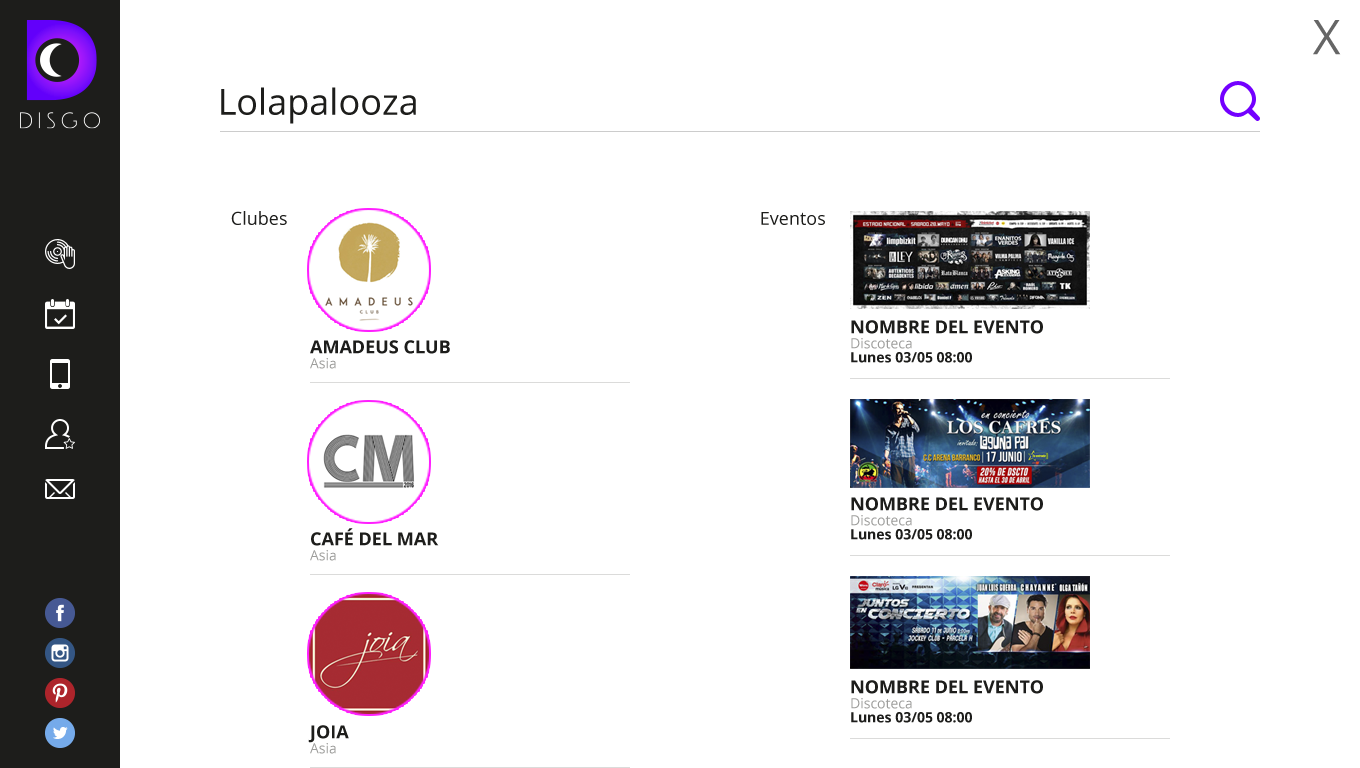
<style>
.page{position:relative;width:1360px;height:768px;background:#ffffff}
.page>*{position:absolute;margin:0}
.t1{font:48px "OpenSans";color:#666666}
.t2{font:36px "OpenSans";color:#1d1d1b}
.t3{font:18px "OpenSans";color:#1d1d1b}
.t4{font:18px "OpenSans-Bold";color:#1d1d1b;text-transform:uppercase}
.t5{font:14px "OpenSans";color:#9d9d9b}
.t6{font:14px "OpenSans-Bold";color:#1d1d1b}
</style>
<div class="page">
<p class="t1" style="left:1313px;top:20px;width:28px;height:35px">X</p>
<p class="t2" style="left:221px;top:87px;width:195px;height:37px">Lolapalooza</p>
<p class="t3" style="left:231px;top:211px;width:56px;height:14px">Clubes</p>
<p class="t3" style="left:761px;top:212px;width:64px;height:13px">Eventos</p>
<p class="t4" style="left:851px;top:320px;width:192px;height:14px">Nombre del evento</p>
<p class="t4" style="left:310px;top:340px;width:140px;height:14px">Amadeus Club</p>
<p class="t5" style="left:851px;top:338px;width:61px;height:11px">Discoteca</p>
<p class="t6" style="left:851px;top:352px;width:121px;height:11px">Lunes 03/05 08:00</p>
<p class="t5" style="left:310px;top:358px;width:26px;height:11px">Asia</p>
<p class="t4" style="left:851px;top:497px;width:192px;height:14px">Nombre del evento</p>
<p class="t5" style="left:851px;top:515px;width:61px;height:11px">Discoteca</p>
<p class="t4" style="left:311px;top:528px;width:128px;height:18px">Café del Mar</p>
<p class="t6" style="left:851px;top:529px;width:121px;height:11px">Lunes 03/05 08:00</p>
<p class="t5" style="left:310px;top:550px;width:26px;height:11px">Asia</p>
<p class="t4" style="left:851px;top:680px;width:192px;height:14px">Nombre del evento</p>
<p class="t5" style="left:851px;top:698px;width:61px;height:11px">Discoteca</p>
<p class="t6" style="left:851px;top:712px;width:121px;height:11px">Lunes 03/05 08:00</p>
<p class="t4" style="left:308px;top:725px;width:41px;height:18px">Joia</p>
<p class="t5" style="left:310px;top:743px;width:26px;height:11px">Asia</p>
</div>
